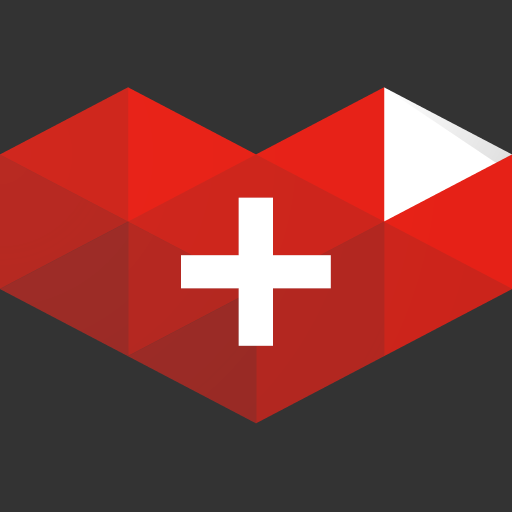
<style>
.page{position:relative;width:512px;height:512px;background:#333333}
.page>*{position:absolute;margin:0}
.t1{font:300px "Attitude-Regular";color:#ffffff}
</style>
<div class="page">
<p class="t1" style="left:181px;top:197px;width:150px;height:149px">+</p>
</div>
